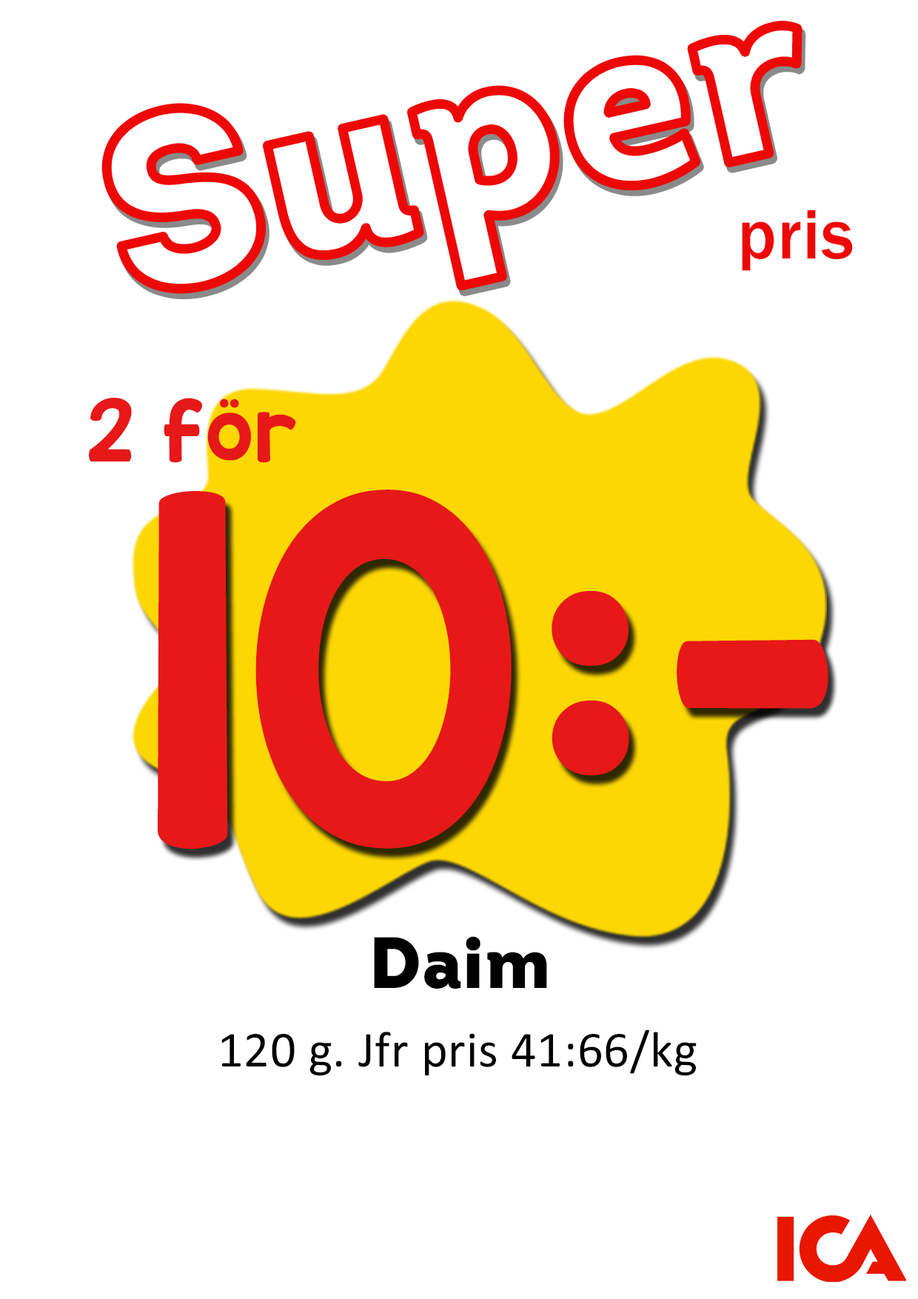
<style>
.page{position:relative;width:918px;height:1299px;background:#ffffff}
.page>*{position:absolute;margin:0}
.t1{font:72.5px "FranklinGothic-Medium";letter-spacing:0.01em;color:#ee0707}
.t2{font:72.5px "KGRedHands";letter-spacing:0.01em;color:#e71818}
.t3{font:401.2px "KGRedHands";letter-spacing:0.01em;color:#e71818}
.t4{font:72.5px "Intro-Black";letter-spacing:0.01em;color:#000000}
.t5{font:50.8px "Calibri";letter-spacing:0.01em;color:#000000}
</style>
<div class="page">
<p class="t1" style="left:742px;top:210px;width:111px;height:61px">pris</p>
<p class="t2" style="left:89px;top:398px;width:207px;height:65px">2 för</p>
<p class="t3" style="left:158px;top:489px;width:671px;height:360px">10:-</p>
<p class="t4" style="left:374px;top:936px;width:173px;height:52px">Daim</p>
<p class="t5" style="left:221px;top:1029px;width:476px;height:47px">120 g. Jfr pris 41:66/kg</p>
</div>
